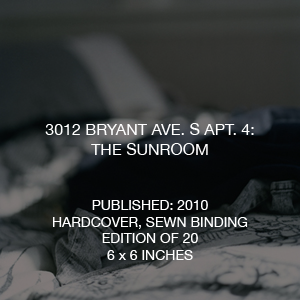
<style>
.page{position:relative;width:300px;height:300px}
.page>*{position:absolute;margin:0}
.t1{font:14px "HelveticaNeue";color:#ffffff}
.t2{font:16px "HelveticaNeue";color:#ffffff}
</style>
<div class="page">
<p class="t1" style="left:45px;top:123px;width:209px;height:137px;text-align:center"><span class="t2">3012 BRYANT AVE. S APT. 4: <br>THE SUNROOM<br><br><br></span>PUBLISHED: 2010<br>HARDCOVER, SEWN BINDING<br>EDITION OF 20<br>6 x 6 INCHES</p>
</div>
